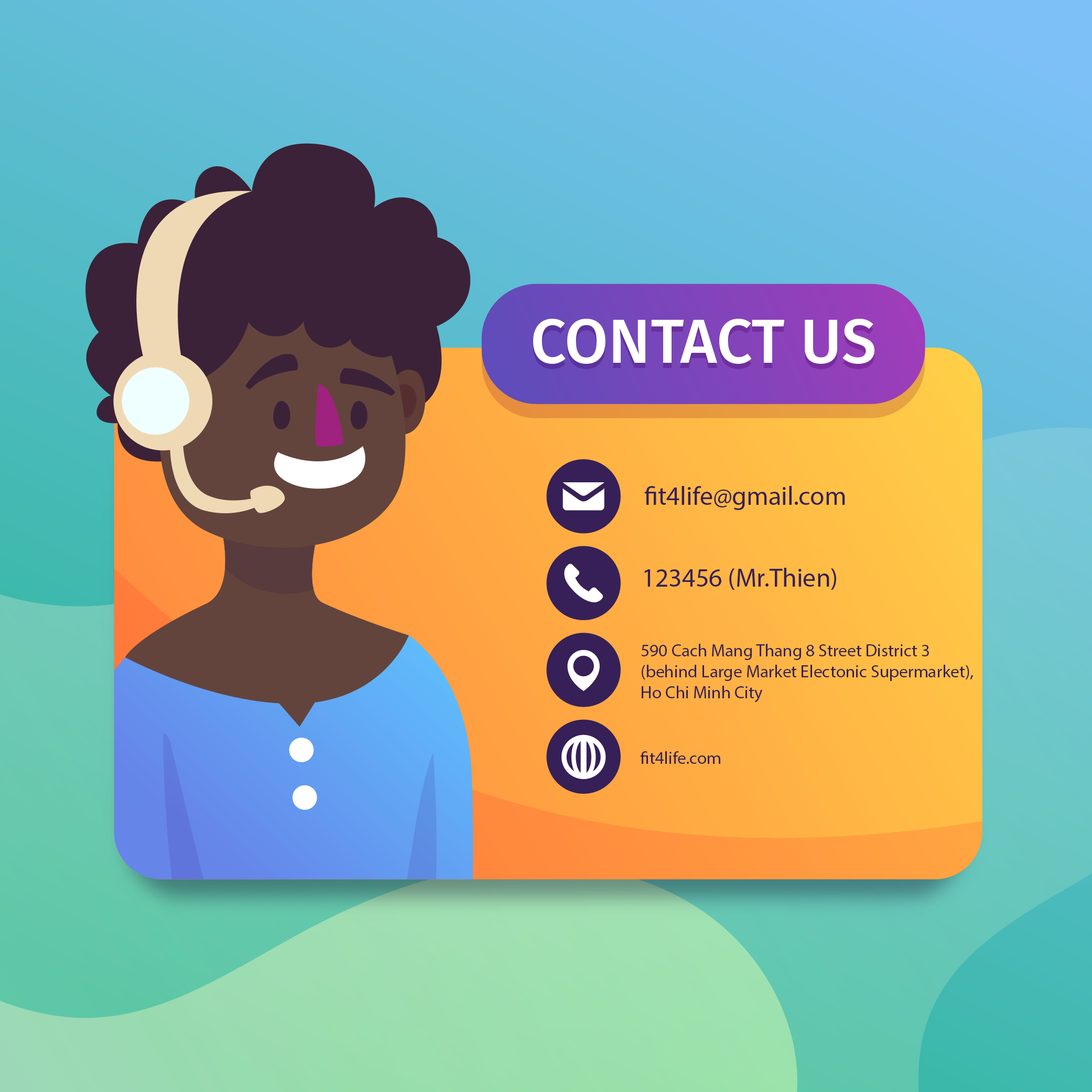
<style>
.page{position:relative;width:1092px;height:1092px}
.page>*{position:absolute;margin:0}
.t1{font:26.2px "MyriadPro-Regular";color:#362057}
.t2{font:17.5px "MyriadPro-Regular";color:#362057}
</style>
<div class="page">
<p class="t1" style="left:644px;top:486px;width:201px;height:24px">fit4life@gmail.com</p>
<p class="t1" style="left:644px;top:568px;width:192px;height:22px">123456 (Mr.Thien)</p>
<p class="t2" style="left:641px;top:644px;width:332px;height:58px">590 Cach Mang Thang 8 Street District 3 <br>(behind Large Market Electonic Supermarket), <br>Ho Chi Minh City</p>
<p class="t2" style="left:640px;top:751px;width:80px;height:13px">fit4life.com</p>
</div>
